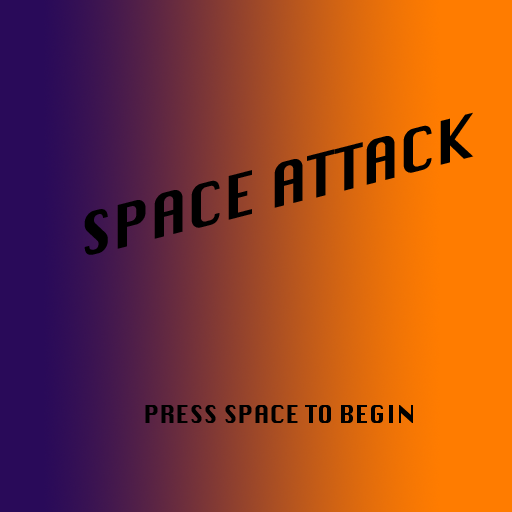
<style>
.page{position:relative;width:512px;height:512px}
.page>*{position:absolute;margin:0}
.t1{font:58.3px "Krungthep";color:#000000}
.t2{font:24px "Krungthep";color:#000000}
</style>
<div class="page">
<p class="t1" style="left:84px;top:112px;width:390px;height:143px;rotate:-14deg">SPACE ATTACK</p>
<p class="t2" style="left:145px;top:405px;width:268px;height:18px">PRESS SPACE TO BEGIN</p>
</div>
